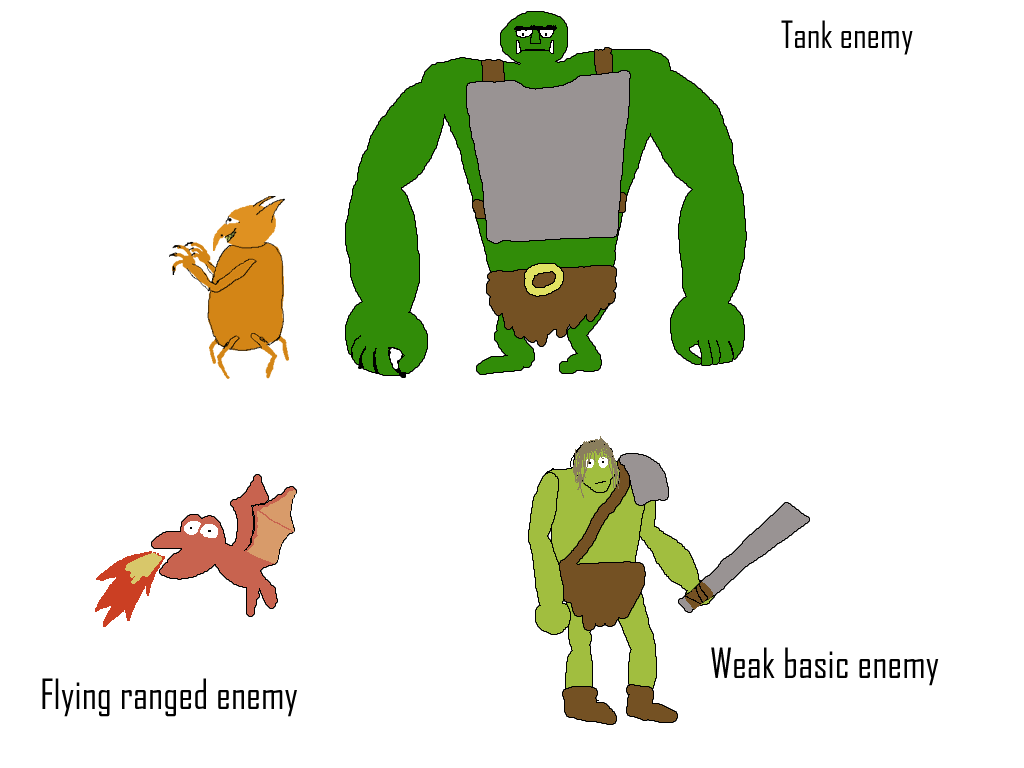
<style>
.page{position:relative;width:1024px;height:768px;background:#ffffff}
.page>*{position:absolute;margin:0}
.t1{font:36px "AgencyFB-Reg";color:#000000}
.t2{font:40px "AgencyFB-Reg";color:#000000}
</style>
<div class="page">
<p class="t1" style="left:781px;top:20px;width:132px;height:35px">Tank enemy</p>
<p class="t2" style="left:711px;top:647px;width:228px;height:39px">Weak basic enemy</p>
<p class="t2" style="left:42px;top:678px;width:255px;height:39px">Flying ranged enemy</p>
</div>
